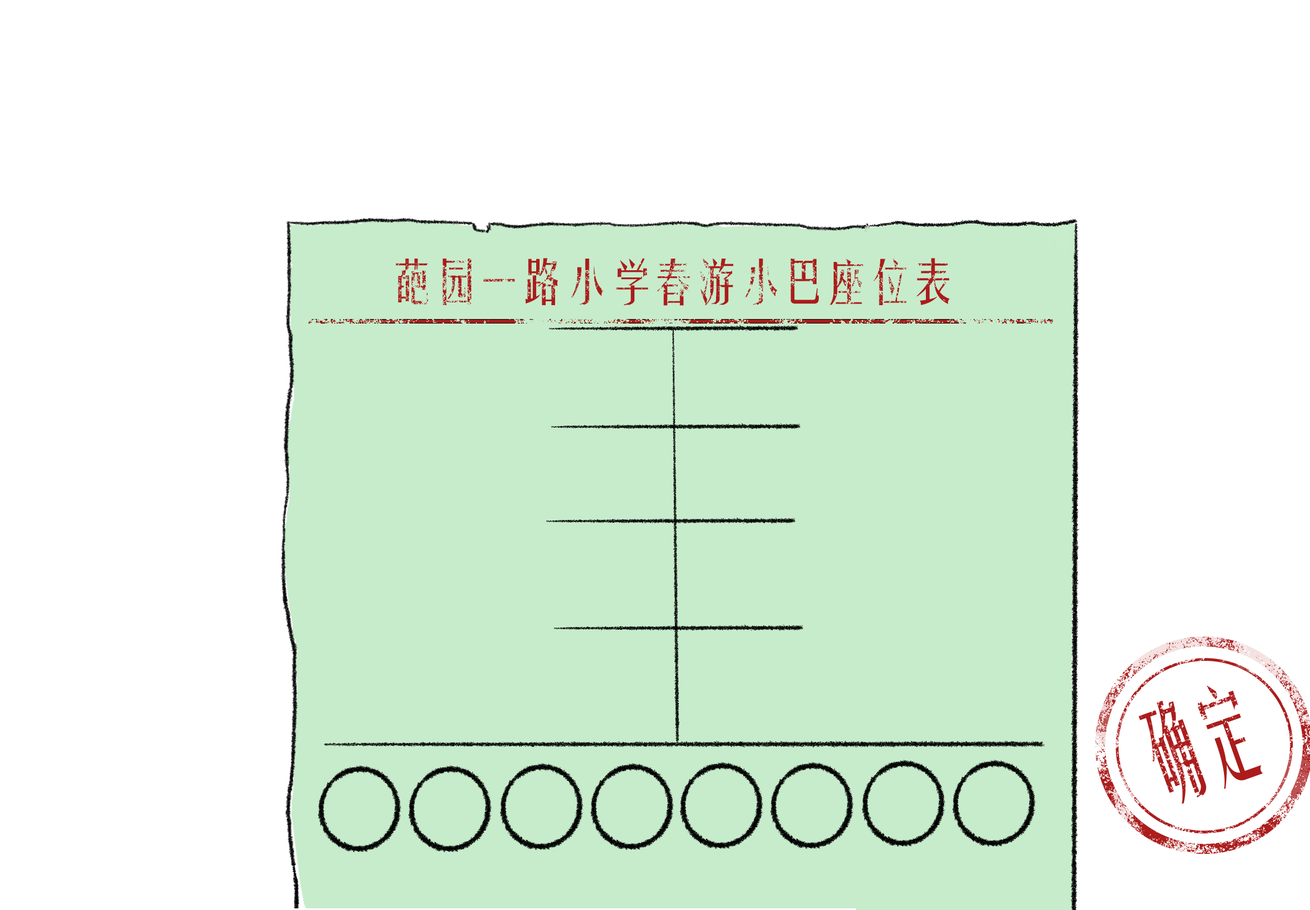
<style>
.page{position:relative;width:1310px;height:910px;background:#ffffff}
.page>*{position:absolute;margin:0}
.t1{font:48.3px "FZYTK--GBK1-0";letter-spacing:-0.1em;color:#ab1c1c}
.t2{font:106.7px "FZYTK--GBK1-0";letter-spacing:-0.1em;color:#ab1c1c;scale:0.59 1}
</style>
<div class="page">
<p class="t1" style="left:396px;top:258px;width:554px;height:48px">葩园一路小学春游小巴座位表</p>
<p class="t2" style="left:1138px;top:685px;width:125px;height:119px;rotate:-20deg">确定</p>
</div>
